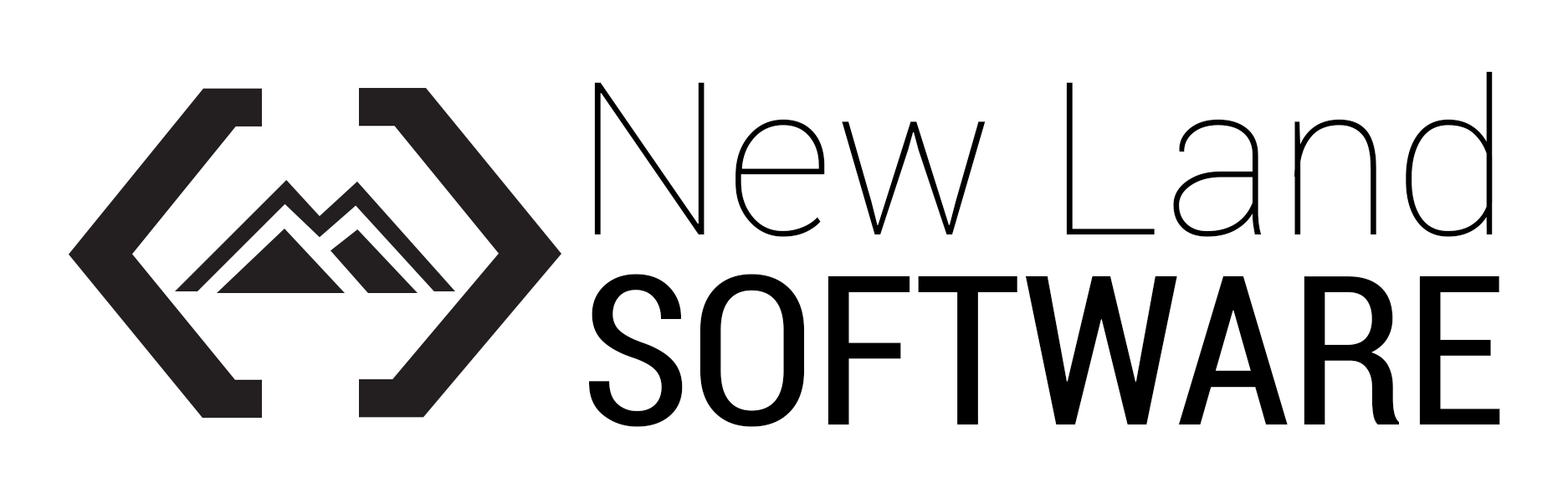
<style>
.page{position:relative;width:1568px;height:499px;background:#ffffff}
.page>*{position:absolute;margin:0}
.t1{font:213.4px "Roboto-Thin";color:#000000}
.t2{font:208px "Roboto-Condensed";color:#000000}
</style>
<div class="page">
<p class="t1" style="left:594px;top:71px;width:899px;height:166px">New Land</p>
<p class="t2" style="left:589px;top:274px;width:911px;height:153px">SOFTWARE</p>
</div>
